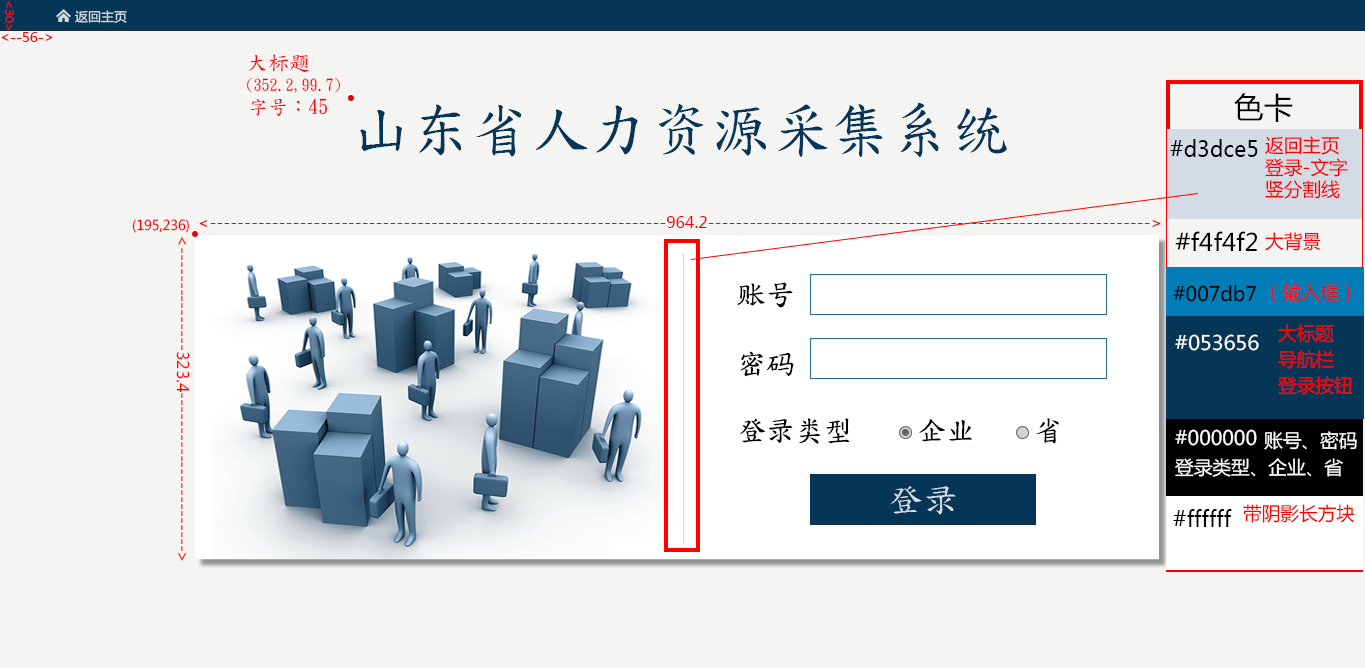
<style>
.page{position:relative;width:1365px;height:668px;background:#f4f4f2}
.page>*{position:absolute;margin:0}
.t1{font:9px "MicrosoftYaHei";color:#fd0101;scale:0.91 1}
.t2{font:9.4px "MicrosoftYaHei";color:#d3dce5;scale:1.03 1}
.t3{font:10.1px "MicrosoftYaHei";color:#fd0101}
.t4{font:15.7px "DFKaiShu-SB-Estd-BF";color:#fd0107}
.t5{font:12px "DFKaiShu-SB-Estd-BF";color:#fd0107}
.t6{font:15px "DFKaiShu-SB-Estd-BF";color:#fd0113}
.t7{font:22.2px "MicrosoftYaHei";color:#000000}
.t8{font:45px "DFKaiShu-SB-Estd-BF";color:#053657}
.t9{font:14.2px "MicrosoftYaHei";color:#fd0101}
.t10{font:16.2px "MicrosoftYaHei";color:#000000}
.t11{font:12px "MicrosoftYaHei";color:#fd0101}
.t12{font:18.2px "MicrosoftYaHei";color:#000000}
.t13{font:21.8px "DFKaiShu-SB-Estd-BF";color:#000000}
.t14{font:14.8px "MicrosoftYaHei";color:#000000}
.t15{font:14.8px "MicrosoftYaHei";color:#fffdfd}
.t16{font:14.2px "MicrosoftYaHei";color:#ffffff}
.t17{font:25.5px "DFKaiShu-SB-Estd-BF";color:#d3dce5;scale:1.07 1}
</style>
<div class="page">
<p class="t1" style="left:5px;top:1px;width:9px;height:30px">&lt;30&gt;</p>
<p class="t2" style="left:75px;top:10px;width:52px;height:13px">返回主页</p>
<p class="t3" style="left:1px;top:32px;width:52px;height:10px">&lt;--56-&gt;</p>
<p class="t4" style="left:248px;top:54px;width:61px;height:18px">大标题</p>
<p class="t5" style="left:247px;top:77px;width:94px;height:16px">(352.2,99.7)</p>
<p class="t6" style="left:251px;top:98px;width:77px;height:18px">字号：45</p>
<p class="t7" style="left:1234px;top:93px;width:59px;height:29px">色卡</p>
<p class="t8" style="left:360px;top:103px;width:647px;height:54px">山东省人力资源采集系统</p>
<p class="t9" style="left:1265px;top:136px;width:75px;height:19px">返回主页</p>
<p class="t10" style="left:1170px;top:139px;width:88px;height:18px">#d3dce5</p>
<p class="t9" style="left:1265px;top:158px;width:83px;height:19px">登录-文字</p>
<p class="t9" style="left:1265px;top:180px;width:75px;height:19px">竖分割线</p>
<p class="t3" style="left:132px;top:219px;width:57px;height:14px">(195,236)</p>
<p class="t11" style="left:199px;top:216px;width:962px;height:12px">&lt;------------------------------------------------------------------964.2----------------------------------------------------------------&gt;</p>
<p class="t12" style="left:1175px;top:231px;width:82px;height:20px">#f4f4f2</p>
<p class="t9" style="left:1265px;top:232px;width:56px;height:19px">大背景</p>
<p class="t11" style="left:176px;top:237px;width:14px;height:324px">&lt;---------------323.4-----------------------&gt;</p>
<p class="t13" style="left:738px;top:282px;width:55px;height:26px">账号</p>
<p class="t14" style="left:1173px;top:285px;width:84px;height:17px">#007db7</p>
<p class="t9" style="left:1271px;top:283px;width:80px;height:20px">（输入框）</p>
<p class="t9" style="left:1278px;top:324px;width:56px;height:19px">大标题</p>
<p class="t15" style="left:1175px;top:334px;width:84px;height:17px">#053656</p>
<p class="t13" style="left:740px;top:351px;width:54px;height:26px">密码</p>
<p class="t9" style="left:1278px;top:350px;width:56px;height:19px">导航栏</p>
<p class="t9" style="left:1278px;top:376px;width:75px;height:19px">登录按钮</p>
<p class="t13" style="left:740px;top:418px;width:110px;height:26px">登录类型</p>
<p class="t13" style="left:919px;top:419px;width:53px;height:23px">企业</p>
<p class="t13" style="left:1036px;top:418px;width:23px;height:26px">省</p>
<p class="t15" style="left:1175px;top:429px;width:82px;height:17px">#000000</p>
<p class="t16" style="left:1264px;top:431px;width:93px;height:19px">账号、密码</p>
<p class="t16" style="left:1175px;top:458px;width:168px;height:19px">登录类型、企业、省</p>
<p class="t17" style="left:890px;top:486px;width:66px;height:29px">登录</p>
<p class="t10" style="left:1173px;top:509px;width:59px;height:18px">#ffffff</p>
<p class="t9" style="left:1243px;top:504px;width:112px;height:19px">带阴影长方块</p>
</div>
